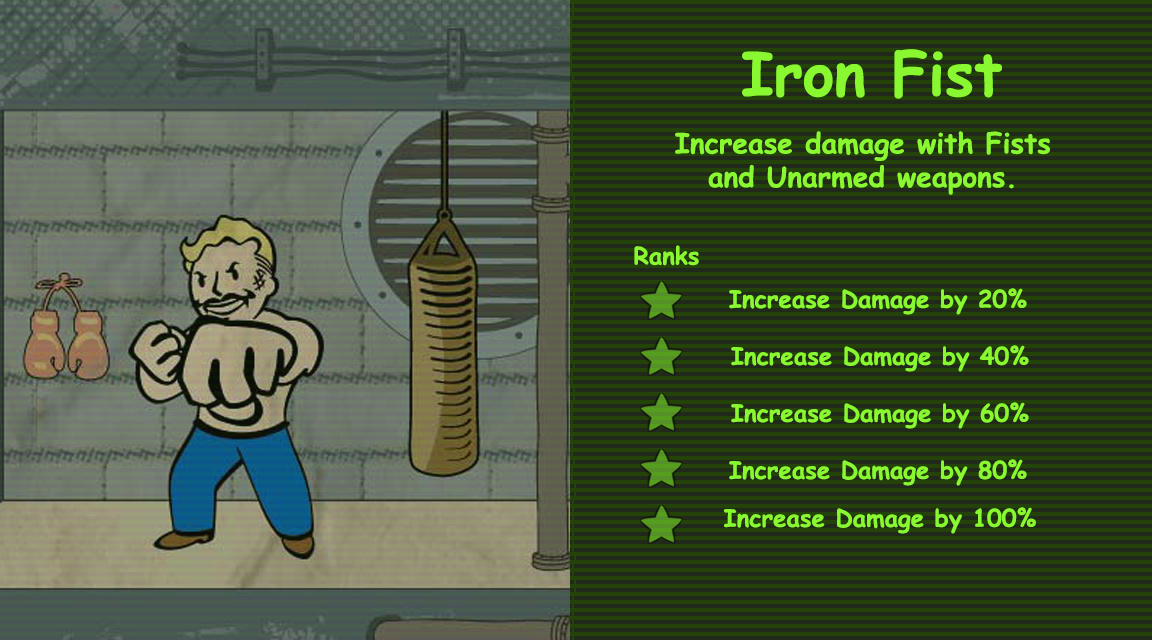
<style>
.page{position:relative;width:1152px;height:640px;background:#21291b}
.page>*{position:absolute;margin:0}
.t1{font:60px "ComicSansMS-Bold";color:#89f830}
.t2{font:28px "ComicSansMS-Bold";color:#89f830}
.t3{font:24px "ComicSansMS-Bold";color:#89f830}
</style>
<div class="page">
<p class="t1" style="left:742px;top:49px;width:260px;height:50px">Iron Fist</p>
<p class="t2" style="left:675px;top:131px;width:375px;height:64px;text-align:center">Increase damage with Fists and Unarmed weapons.</p>
<p class="t3" style="left:634px;top:245px;width:65px;height:21px">Ranks</p>
<p class="t3" style="left:729px;top:288px;width:298px;height:27px">Increase Damage by 20%</p>
<p class="t3" style="left:731px;top:345px;width:298px;height:27px">Increase Damage by 40%</p>
<p class="t3" style="left:731px;top:402px;width:298px;height:27px">Increase Damage by 60%</p>
<p class="t3" style="left:729px;top:459px;width:298px;height:27px">Increase Damage by 80%</p>
<p class="t3" style="left:723px;top:507px;width:313px;height:27px">Increase Damage by 100%</p>
</div>
